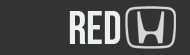
<style>
.page{position:relative;width:190px;height:55px;background:#333333}
.page>*{position:absolute;margin:0}
.t1{font:45.8px "BebasNeue-Regular";color:#ecf0f1}
</style>
<div class="page">
<p class="t1" style="left:69px;top:11px;width:52px;height:33px">red</p>
</div>
